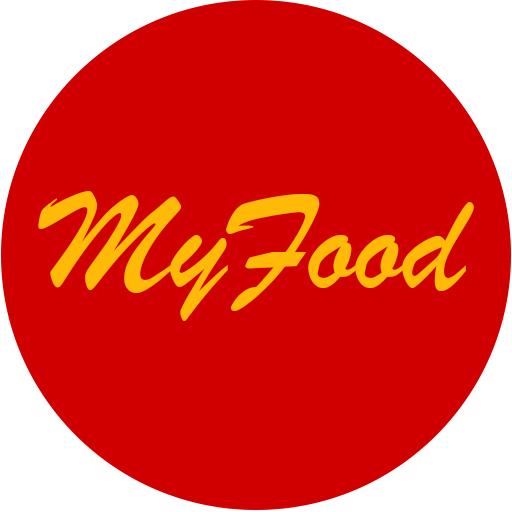
<style>
.page{position:relative;width:512px;height:512px;background:#d00000}
.page>*{position:absolute;margin:0}
.t1{font:150px "BrushScriptMT";color:#ffba08}
</style>
<div class="page">
<p class="t1" style="left:38px;top:191px;width:436px;height:130px">MyFood</p>
</div>
